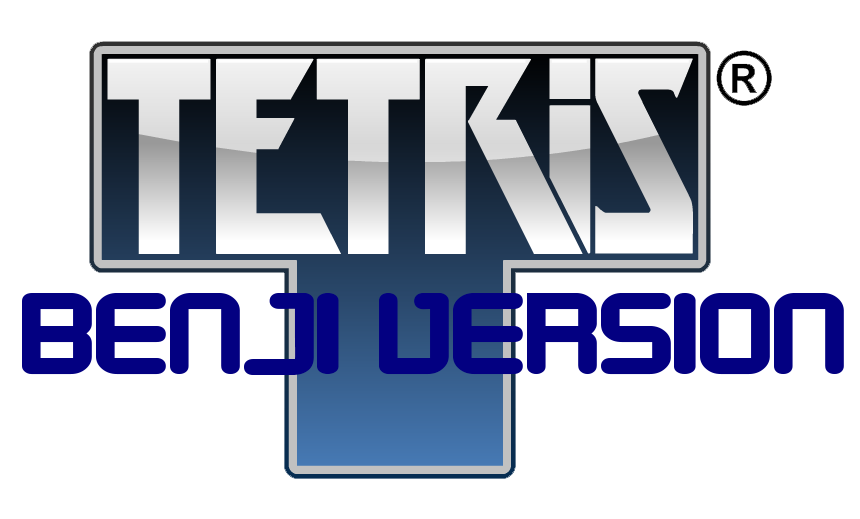
<style>
.page{position:relative;width:860px;height:519px;background:#ffffff}
.page>*{position:absolute;margin:0}
.t1{font:118.3px "DesignerBlock";color:#030081;scale:1.15 1}
</style>
<div class="page">
<p class="t1" style="left:22px;top:293px;width:822px;height:82px">BENJI VERSION</p>
</div>
